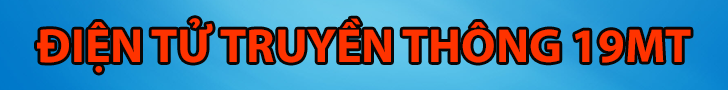
<style>
.page{position:relative;width:728px;height:90px}
.page>*{position:absolute;margin:0}
.t1{font:48px "MyriadPro-Bold";color:#ff3300}
</style>
<div class="page">
<p class="t1" style="left:37px;top:18px;width:654px;height:55px">ĐIỆN TỬ TRUYỀN THÔNG 19MT</p>
</div>
